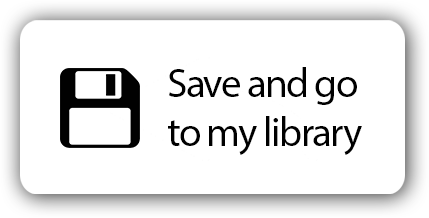
<style>
.page{position:relative;width:429px;height:218px;background:#ffffff}
.page>*{position:absolute;margin:0}
.t1{font:41px "MyriadPro-Regular";letter-spacing:-0.04em;color:#000000}
</style>
<div class="page">
<p class="t1" style="left:168px;top:67px;width:194px;height:88px">Save and go<br>to my library</p>
</div>
